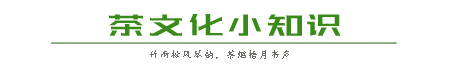
<style>
.page{position:relative;width:460px;height:77px;background:#ffffff}
.page>*{position:absolute;margin:0}
.t1{font:36px "HuXiaoBoKuHei";letter-spacing:0.1em;color:#3a8a1a}
.t2{font:10px "KaiTi";letter-spacing:0.1em;color:#6b7069}
</style>
<div class="page">
<p class="t1" style="left:109px;top:14px;width:232px;height:22px">茶文化小知识</p>
<p class="t2" style="left:150px;top:50px;width:139px;height:9px">竹雨松风琴韵，茶烟梧月书声</p>
</div>
